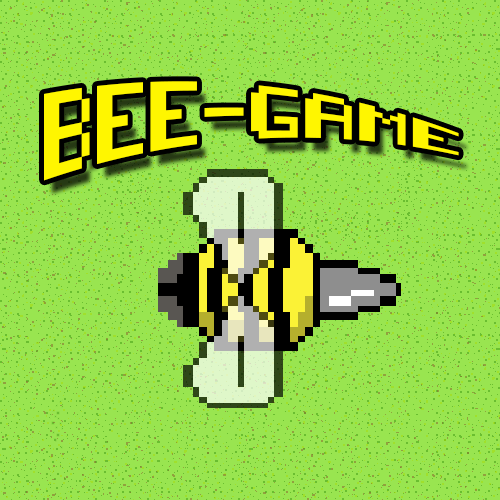
<style>
.page{position:relative;width:500px;height:500px;background:#99e550}
.page>*{position:absolute;margin:0}
.t1{font:46px/64.7px "8-bit-pusab";color:#fff600}
</style>
<div class="page">
<p class="t1" style="left:44px;top:81px;width:415px;height:100px;text-align:center">BEE-GAME</p>
</div>
